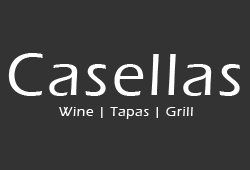
<style>
.page{position:relative;width:250px;height:170px;background:#333333}
.page>*{position:absolute;margin:0}
.t1{font:62px "ErasITC-Medium";letter-spacing:0.05em;color:#ffffff}
.t2{font:14px "ErasITC-Medium";letter-spacing:0.05em;color:#ffffff}
</style>
<div class="page">
<p class="t1" style="left:8px;top:53px;width:232px;height:43px">Casellas</p>
<p class="t2" style="left:59px;top:107px;width:134px;height:12px">Wine | Tapas | Grill</p>
</div>
